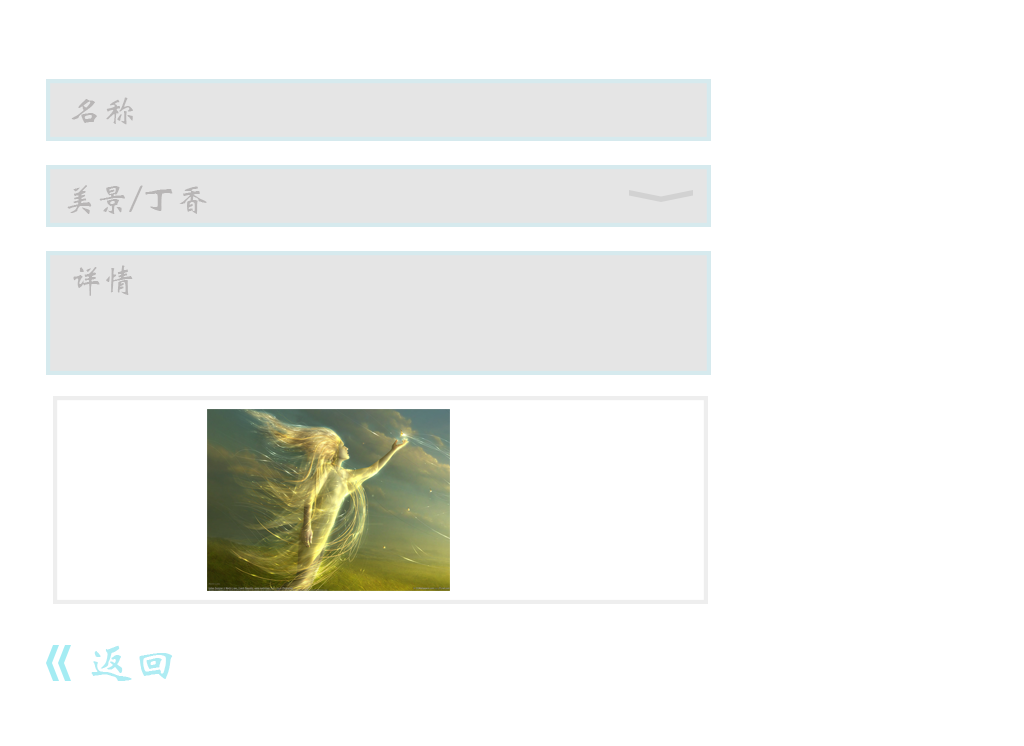
<style>
.page{position:relative;width:1024px;height:746px;background:#ffffff}
.page>*{position:absolute;margin:0}
.t1{font:33.3px "STXinwei";color:#b8b6b6}
.t2{font:45.8px "STXinwei";color:#aeecf3}
</style>
<div class="page">
<p class="t1" style="left:71px;top:97px;width:62px;height:28px">名称</p>
<p class="t1" style="left:67px;top:185px;width:140px;height:29px">美景/丁香</p>
<p class="t1" style="left:73px;top:265px;width:60px;height:31px">详情</p>
<p class="t2" style="left:91px;top:645px;width:82px;height:36px">返回</p>
</div>
